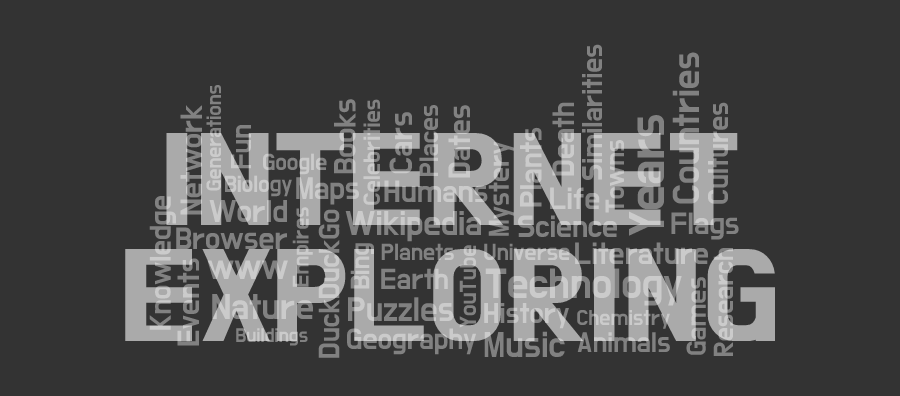
<style>
.page{position:relative;width:900px;height:396px;background:#333333}
.page>*{position:absolute;margin:0}
.t1{font:29.4px "DoHyeon-Regular";color:#818181}
.t2{font:38.6px "DoHyeon-Regular";color:#818181}
.t3{font:21.5px "DoHyeon-Regular"}
.t4{font:31.5px "DoHyeon-Regular";color:#818181}
.t5{font:24.2px "DoHyeon-Regular"}
.t6{font:31.5px "DoHyeon-Regular"}
.t7{font:32.9px "DoHyeon-Regular"}
.t8{font:27.3px "DoHyeon-Regular";color:#818181}
.t9{font:51.5px "DoHyeon-Regular";color:#818181}
.t10{font:135.1px/116.1px "DoHyeon-Regular";color:#aaaaaa;font-weight:bold}
.t11{font:31.5px "DoHyeon-Regular";color:#cbcbcb}
.t12{font:29.6px "DoHyeon-Regular";color:#818181}
.t13{font:24px "DoHyeon-Regular"}
.t14{font:32px "DoHyeon-Regular"}
.t15{font:30.5px "DoHyeon-Regular"}
.t16{font:32.1px "DoHyeon-Regular"}
.t17{font:23.4px "DoHyeon-Regular"}
.t18{font:30.1px "DoHyeon-Regular"}
.t19{font:35.4px "DoHyeon-Regular"}
.t20{font:27.3px "DoHyeon-Regular";color:#cbcbcb}
.t21{font:24px "DoHyeon-Regular";color:#818181}
.t22{font:36.4px "DoHyeon-Regular";color:#cbcbcb}
.t23{font:29.8px "DoHyeon-Regular";color:#818181}
.t24{font:43.2px "DoHyeon-Regular"}
.t25{font:34.8px "DoHyeon-Regular"}
.t26{font:29.5px "DoHyeon-Regular"}
.t27{font:22px "DoHyeon-Regular"}
.t28{font:20.2px "DoHyeon-Regular"}
.t29{font:30px "DoHyeon-Regular"}
.t30{font:36.9px "DoHyeon-Regular";color:#818181}
.t31{font:29px "DoHyeon-Regular";color:#818181}
</style>
<div class="page">
<p class="t1" style="left:582px;top:44px;width:20px;height:136px;rotate:-90deg">Similarities</p>
<p class="t2" style="left:672px;top:52px;width:27px;height:152px;rotate:-90deg">Countries</p>
<p class="t3" style="left:206px;top:85px;width:15px;height:106px;rotate:-90deg">Generations</p>
<p class="t4" style="left:334px;top:99px;width:22px;height:75px;rotate:-90deg">Books</p>
<p class="t5" style="left:363px;top:99px;width:17px;height:106px;rotate:-90deg">Celebrities</p>
<p class="t6" style="left:552px;top:102px;width:22px;height:74px;rotate:-90deg">Death</p>
<p class="t1" style="left:708px;top:102px;width:20px;height:102px;rotate:-90deg">Cultures</p>
<p class="t4" style="left:180px;top:105px;width:22px;height:110px;rotate:-90deg">Network</p>
<p class="t7" style="left:389px;top:112px;width:23px;height:62px;rotate:-90deg">Cars</p>
<p class="t8" style="left:419px;top:105px;width:19px;height:71px;rotate:-90deg">Places</p>
<p class="t6" style="left:448px;top:105px;width:22px;height:73px;rotate:-90deg">Dates</p>
<p class="t1" style="left:231px;top:125px;width:20px;height:44px;rotate:-90deg">Fun</p>
<p class="t9" style="left:629px;top:115px;width:35px;height:121px;rotate:-90deg">Years</p>
<p class="t10" style="left:125px;top:133px;width:650px;height:208px;text-align:center">INTERNET<br>EXPLORING</p>
<p class="t11" style="left:520px;top:127px;width:22px;height:80px;rotate:-90deg">Plants</p>
<p class="t12" style="left:488px;top:141px;width:26px;height:95px;rotate:-90deg">Mystery</p>
<p class="t13" style="left:263px;top:153px;width:64px;height:22px">Google</p>
<p class="t13" style="left:225px;top:175px;width:67px;height:22px">Biology</p>
<p class="t14" style="left:296px;top:177px;width:63px;height:28px">Maps</p>
<p class="t15" style="left:149px;top:196px;width:27px;height:134px;rotate:-90deg">Knowledge</p>
<p class="t11" style="left:550px;top:187px;width:50px;height:23px">Life</p>
<p class="t16" style="left:209px;top:200px;width:78px;height:22px">World</p>
<p class="t17" style="left:292px;top:207px;width:21px;height:80px;rotate:-90deg">Empires</p>
<p class="t18" style="left:318px;top:209px;width:22px;height:149px;rotate:-90deg">DuckDuckGo</p>
<p class="t19" style="left:345px;top:211px;width:136px;height:31px">Wikipedia</p>
<p class="t4" style="left:518px;top:215px;width:99px;height:22px">Science</p>
<p class="t4" style="left:671px;top:212px;width:68px;height:28px">Flags</p>
<p class="t4" style="left:176px;top:227px;width:111px;height:23px">Browser</p>
<p class="t20" style="left:350px;top:243px;width:24px;height:46px;rotate:-90deg">Bing</p>
<p class="t21" style="left:381px;top:243px;width:73px;height:18px">Planets</p>
<p class="t21" style="left:459px;top:245px;width:17px;height:83px;rotate:-90deg">YouTube</p>
<p class="t13" style="left:484px;top:243px;width:86px;height:18px">Universe</p>
<p class="t6" style="left:575px;top:242px;width:133px;height:23px">Literature</p>
<p class="t4" style="left:177px;top:258px;width:22px;height:88px;rotate:-90deg">Events</p>
<p class="t22" style="left:207px;top:260px;width:81px;height:19px">www</p>
<p class="t23" style="left:381px;top:268px;width:67px;height:21px">Earth</p>
<p class="t24" style="left:485px;top:268px;width:197px;height:38px">Technology</p>
<p class="t25" style="left:348px;top:297px;width:105px;height:24px">Puzzles</p>
<p class="t26" style="left:484px;top:303px;width:85px;height:26px">History</p>
<p class="t27" style="left:577px;top:310px;width:93px;height:19px">Chemistry</p>
<p class="t28" style="left:236px;top:328px;width:72px;height:18px">Buildings</p>
<p class="t29" style="left:347px;top:328px;width:129px;height:27px">Geography</p>
<p class="t30" style="left:484px;top:331px;width:81px;height:26px">Music</p>
<p class="t31" style="left:577px;top:332px;width:93px;height:20px">Animals</p>
</div>
